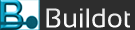
<style>
.page{position:relative;width:135px;height:30px;background:#2d2d2d}
.page>*{position:absolute;margin:0}
.t1{font:27.3px "Sansation";color:#f4f4f4}
</style>
<div class="page">
<p class="t1" style="left:46px;top:8px;width:84px;height:20px">Buildot</p>
</div>
